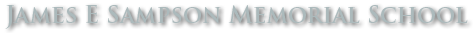
<style>
.page{position:relative;width:475px;height:33px;background:#ffffff}
.page>*{position:absolute;margin:0}
.t1{font:23.6px "TrajanPro-Bold";color:#acbabc}
</style>
<div class="page">
<p class="t1" style="left:5px;top:5px;width:463px;height:24px">James E Sampson Memorial School</p>
</div>
